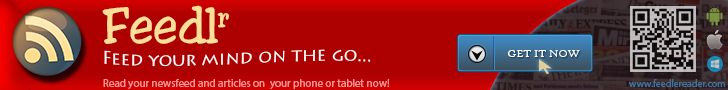
<style>
.page{position:relative;width:728px;height:90px;background:#ad0101}
.page>*{position:absolute;margin:0}
.t1{font:48px "Toledo";color:#fedf98}
.t2{font:18px "LithosPro-Regular";color:#fbf9f9}
.t3{font:11px "HighTowerText-Reg";color:#ffffff}
.t4{font:11px "MyriadPro-Regular";color:#fa9090}
.t5{font:10px "MyriadPro-Regular";color:#3e729a}
</style>
<div class="page">
<p class="t1" style="left:102px;top:5px;width:127px;height:39px">Feedlr</p>
<p class="t2" style="left:104px;top:49px;width:267px;height:18px">Feed your mind on the go...</p>
<p class="t3" style="left:508px;top:50px;width:72px;height:7px">GET IT NOW</p>
<p class="t4" style="left:103px;top:79px;width:287px;height:10px">Read your newsfeed and articles on  your phone or tablet now!</p>
<p class="t5" style="left:629px;top:79px;width:96px;height:8px">www.feedlereader.com</p>
</div>
